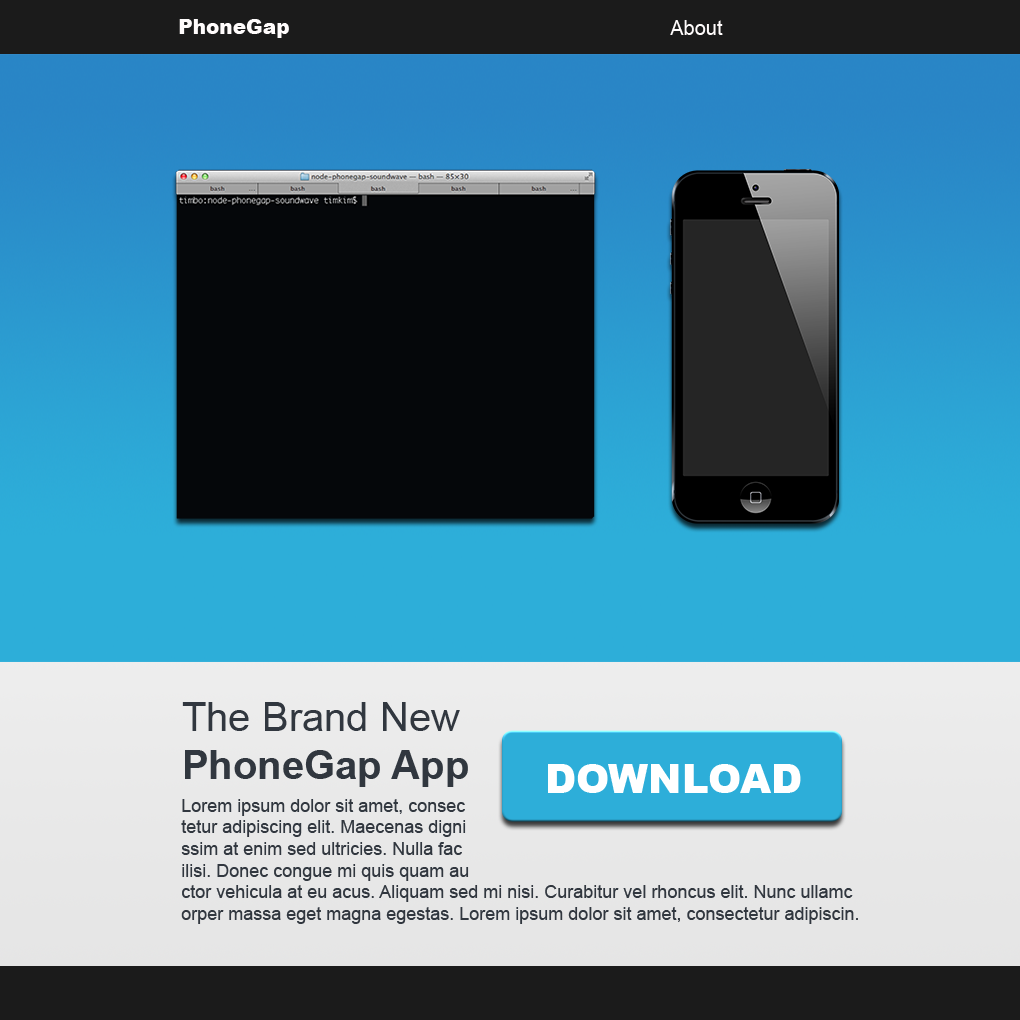
<style>
.page{position:relative;width:1020px;height:1020px}
.page>*{position:absolute;margin:0}
.t1{font:20px "Arial-Black";color:#fffcfc}
.t2{font:20px "ArialMT";color:#fffcfc}
.t3{font:40px "ArialMT";color:#31373f}
.t4{font:40px "Arial-BoldMT";color:#31373f}
.t5{font:40px "Arial-Black";color:#ffffff}
.t6{font:18px "ArialMT";color:#31373f}
</style>
<div class="page">
<p class="t1" style="left:179px;top:19px;width:110px;height:19px">PhoneGap</p>
<p class="t2" style="left:670px;top:20px;width:53px;height:15px">About</p>
<p class="t3" style="left:182px;top:702px;width:286px;height:85px">The Brand New <br><span class="t4">PhoneGap App</span></p>
<p class="t5" style="left:548px;top:764px;width:253px;height:29px">DOWNLOAD</p>
<p class="t6" style="left:181px;top:799px;width:677px;height:125px">Lorem ipsum dolor sit amet, consec<br>tetur adipiscing elit. Maecenas digni<br>ssim at enim sed ultricies. Nulla fac<br>ilisi. Donec congue mi quis quam au<br>ctor vehicula at eu acus. Aliquam sed mi nisi. Curabitur vel rhoncus elit. Nunc ullamc<br>orper massa eget magna egestas. Lorem ipsum dolor sit amet, consectetur adipiscin.</p>
</div>
